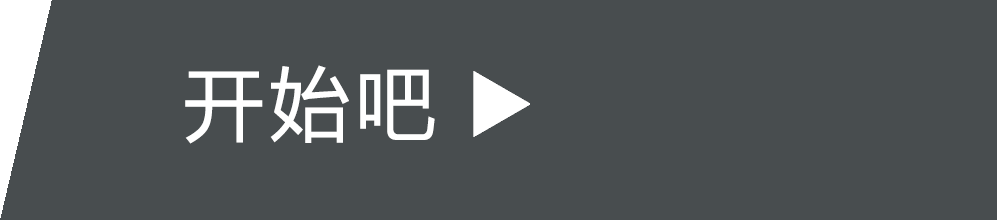
<style>
.page{position:relative;width:997px;height:220px;background:#484d4f}
.page>*{position:absolute;margin:0}
.t1{font:80px "MicrosoftYaHei";letter-spacing:0.075em;color:#ffffff}
</style>
<div class="page">
<p class="t1" style="left:185px;top:65px;width:250px;height:79px">开始吧</p>
</div>
